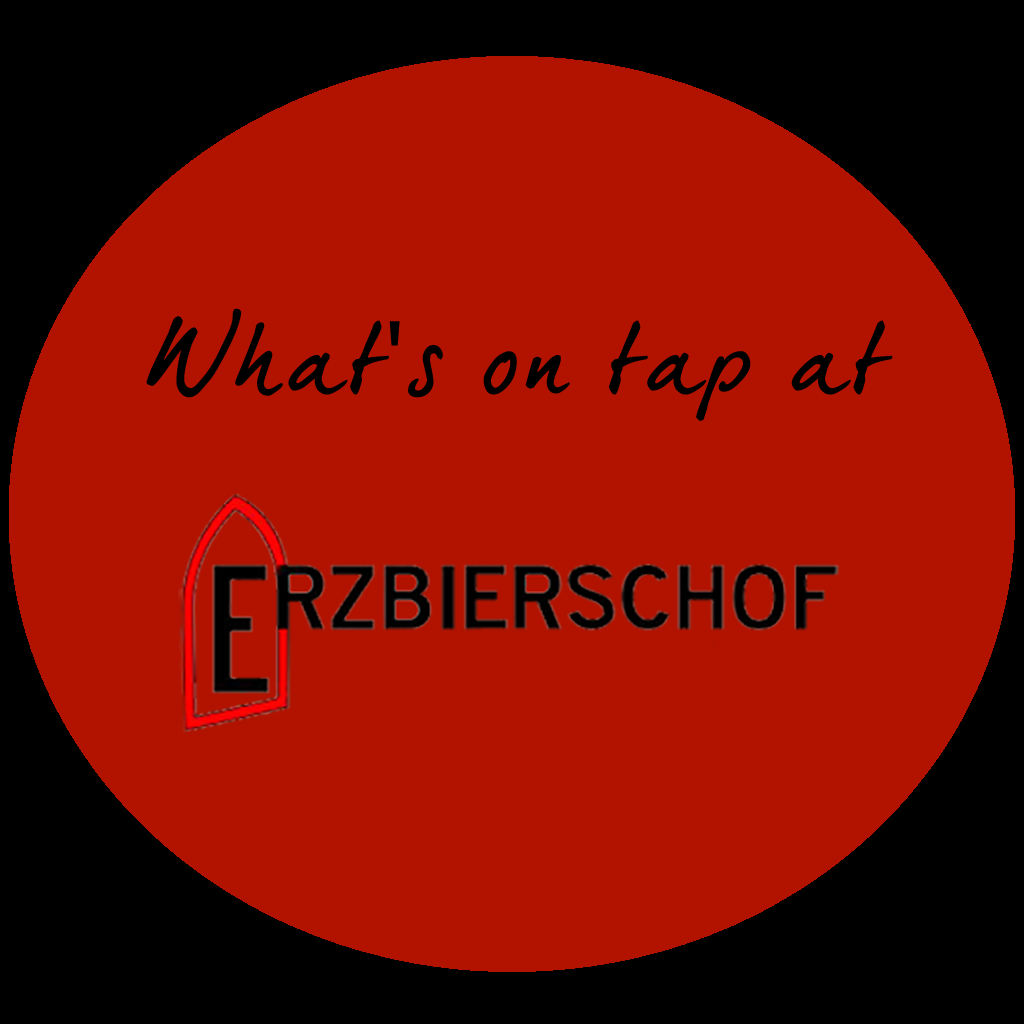
<style>
.page{position:relative;width:1024px;height:1024px;background:#b11300}
.page>*{position:absolute;margin:0}
.t1{font:100px "DearJoe5CASUAL";color:#000000;scale:1.1 1}
.t2{font:100px "MyriadPro-Regular";color:#000000;scale:1.1 1}
</style>
<div class="page">
<p class="t1" style="left:146px;top:308px;width:747px;height:113px">What<span class="t2">'</span>s on tap at</p>
</div>
